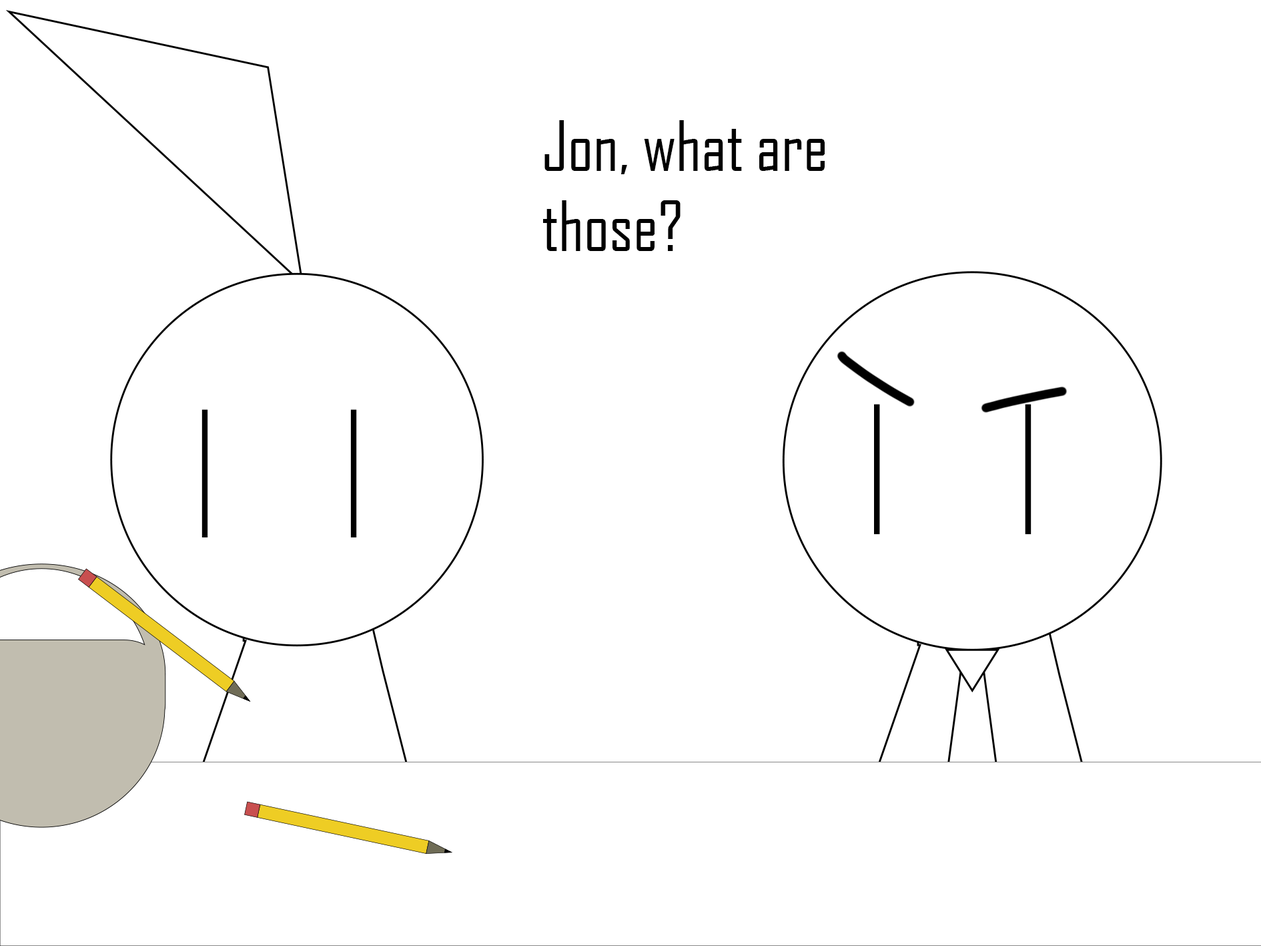
<style>
.page{position:relative;width:1261px;height:946px;background:#ffffff}
.page>*{position:absolute;margin:0}
.t1{font:66.7px "AgencyFB-Reg";color:#000000}
</style>
<div class="page">
<p class="t1" style="left:543px;top:120px;width:282px;height:131px">Jon, what are those?</p>
</div>
